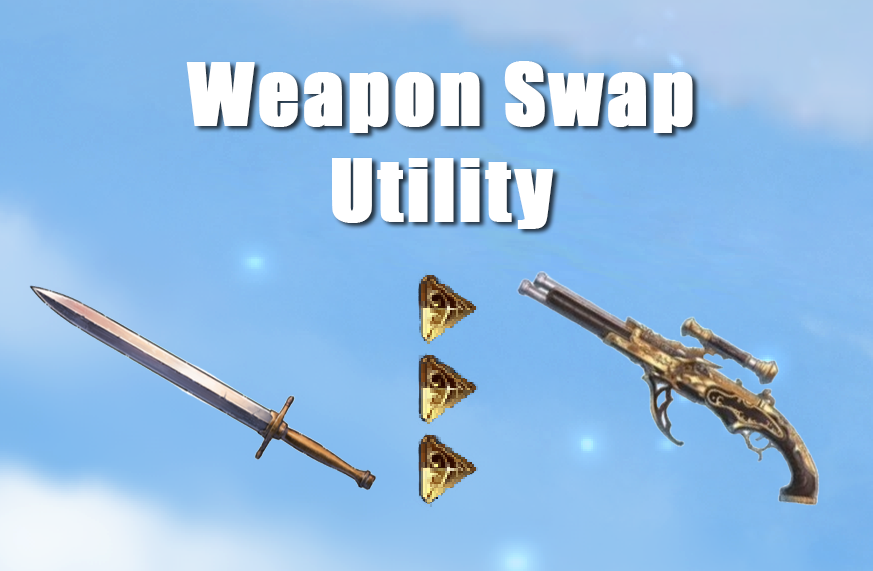
<style>
.page{position:relative;width:873px;height:571px}
.page>*{position:absolute;margin:0}
.t1{font:80px "Impact";letter-spacing:0.025em;color:#ffffff;font-weight:bold}
</style>
<div class="page">
<p class="t1" style="left:186px;top:61px;width:507px;height:168px;text-align:center">Weapon Swap<br>Utility</p>
</div>
